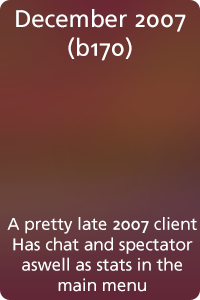
<style>
.page{position:relative;width:200px;height:300px}
.page>*{position:absolute;margin:0}
.t1{font:24px "FrutigerLinotype-Roman";color:#ffffff}
.t2{font:17px "FrutigerLinotype-Roman";color:#ffffff}
</style>
<div class="page">
<p class="t1" style="left:16px;top:9px;width:170px;height:52px;text-align:center">December 2007<br>(b170)</p>
<p class="t2" style="left:7px;top:217px;width:190px;height:75px;text-align:center">A pretty late 2007 client<br>Has chat and spectator<br>aswell as stats in the main menu</p>
</div>
